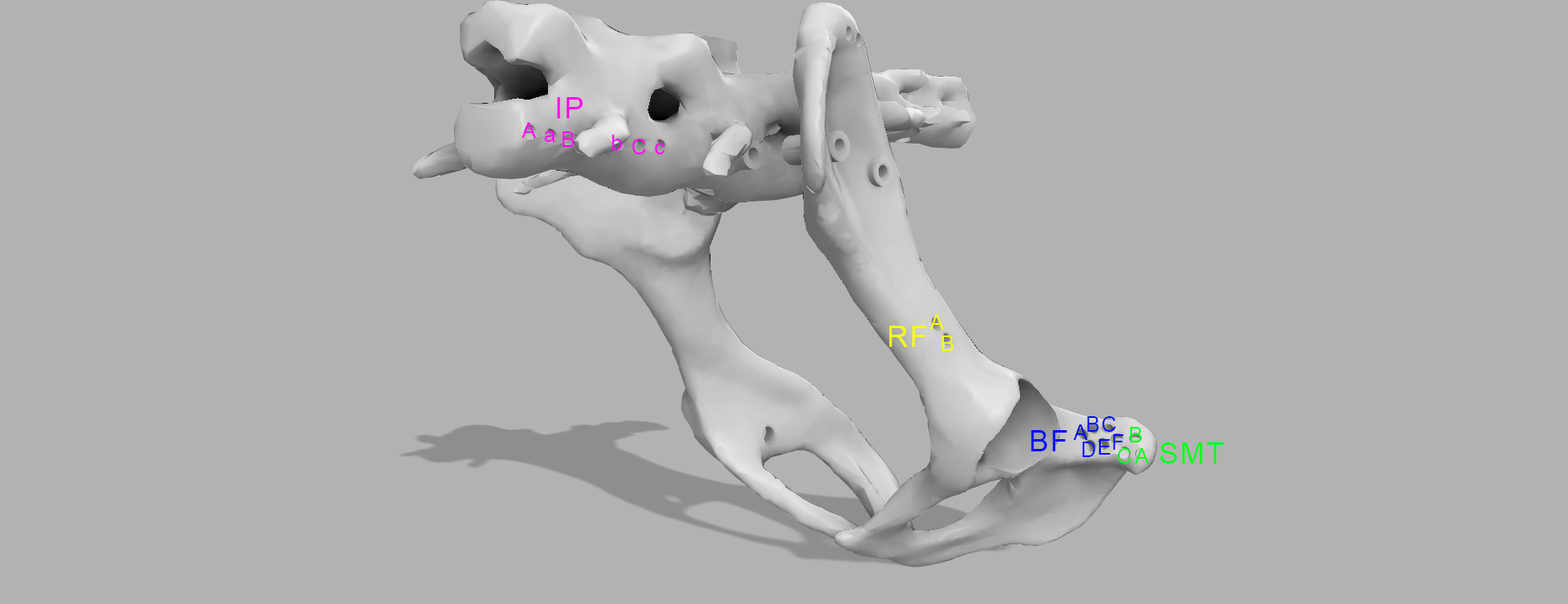
<style>
.page{position:relative;width:1568px;height:604px;background:#b2b2b2}
.page>*{position:absolute;margin:0}
.t1{font:29.4px "ArialMT";letter-spacing:0.06em;color:#ff00f0}
.t2{font:21.2px "ArialMT";letter-spacing:0.06em;color:#ff00f0}
.t3{font:21.2px "ArialMT";letter-spacing:0.06em;color:#f6ff00}
.t4{font:29.4px "ArialMT";letter-spacing:0.06em;color:#f6ff00}
.t5{font:21.2px "ArialMT";letter-spacing:0.06em;color:#000cff}
.t6{font:29.4px "ArialMT";letter-spacing:0.06em;color:#000cff}
.t7{font:21.2px "ArialMT";letter-spacing:0.06em;color:#0600ff}
.t8{font:21.2px "ArialMT";letter-spacing:0.06em;color:#00ff1e}
.t9{font:29.4px "ArialMT";letter-spacing:0.06em;color:#00ff1e}
</style>
<div class="page">
<p class="t1" style="left:557px;top:97px;width:26px;height:21px">IP</p>
<p class="t2" style="left:522px;top:122px;width:15px;height:16px">A</p>
<p class="t2" style="left:545px;top:131px;width:10px;height:11px">a</p>
<p class="t2" style="left:563px;top:131px;width:11px;height:16px">B</p>
<p class="t2" style="left:612px;top:135px;width:10px;height:15px">b</p>
<p class="t2" style="left:632px;top:139px;width:14px;height:15px">C</p>
<p class="t2" style="left:655px;top:143px;width:10px;height:11px">c</p>
<p class="t3" style="left:929px;top:314px;width:15px;height:16px">A</p>
<p class="t4" style="left:889px;top:326px;width:38px;height:21px">RF</p>
<p class="t3" style="left:942px;top:336px;width:12px;height:15px">B</p>
<p class="t5" style="left:1073px;top:425px;width:15px;height:15px">A</p>
<p class="t5" style="left:1087px;top:416px;width:12px;height:16px">B</p>
<p class="t5" style="left:1102px;top:416px;width:14px;height:16px">C</p>
<p class="t6" style="left:1031px;top:430px;width:36px;height:22px">BF</p>
<p class="t7" style="left:1113px;top:434px;width:11px;height:16px">F</p>
<p class="t8" style="left:1130px;top:427px;width:12px;height:16px">B</p>
<p class="t5" style="left:1082px;top:442px;width:13px;height:15px">D</p>
<p class="t5" style="left:1098px;top:439px;width:13px;height:16px">E</p>
<p class="t8" style="left:1117px;top:448px;width:15px;height:16px">C</p>
<p class="t8" style="left:1134px;top:448px;width:15px;height:16px">A</p>
<p class="t9" style="left:1160px;top:443px;width:64px;height:21px">SMT</p>
</div>
